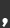
<style>
.page{position:relative;width:10px;height:28px;background:#333333}
.page>*{position:absolute;margin:0}
.t1{font:30px "ProductSans-Bold";color:#ffffff}
</style>
<div class="page">
<p class="t1" style="left:2px;top:18px;width:6px;height:9px">,</p>
</div>
